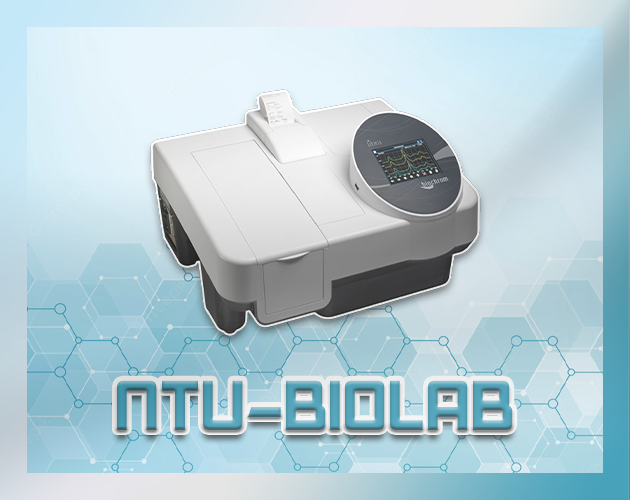
<style>
.page{position:relative;width:630px;height:500px}
.page>*{position:absolute;margin:0}
.t1{font:67.1px "UTM-Akashi"}
</style>
<div class="page">
<p class="t1" style="left:117px;top:380px;width:396px;height:50px">NTU-BIOLAB</p>
</div>
